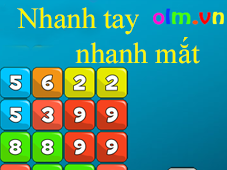
<style>
.page{position:relative;width:227px;height:170px}
.page>*{position:absolute;margin:0}
.t1{font:29.2px "TimesNewRomanPSMT";color:#fff600}
</style>
<div class="page">
<p class="t1" style="left:17px;top:7px;width:183px;height:57px;text-align:center">Nhanh tay<br>                nhanh mắt</p>
</div>
